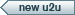
<style>
.page{position:relative;width:75px;height:15px}
.page>*{position:absolute;margin:0}
.t1{font:11px "ReznorBroken";color:#24404b}
</style>
<div class="page">
<p class="t1" style="left:19px;top:3px;width:42px;height:8px">new u2u</p>
</div>
